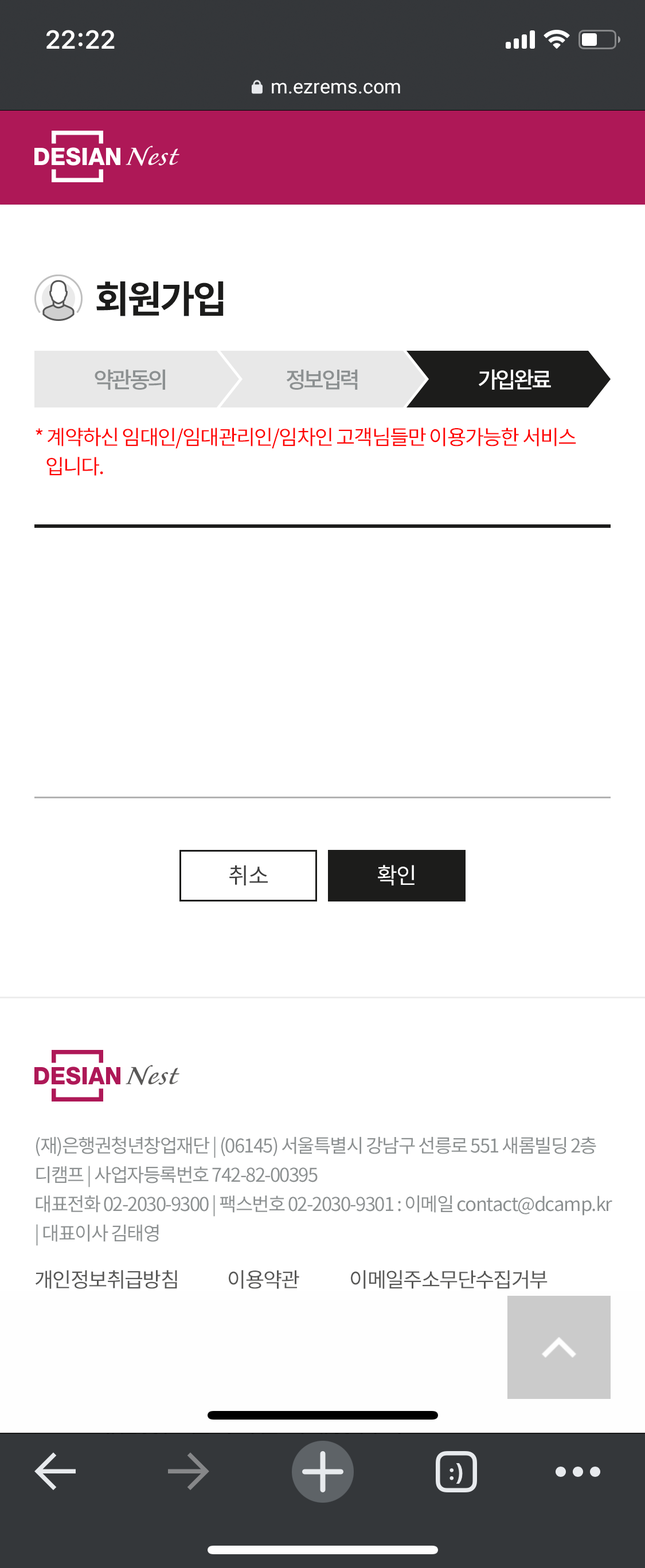
<style>
.page{position:relative;width:645px;height:1568px;background:#ffffff}
.page>*{position:absolute;margin:0}
.t1{font:19.5px "Roboto-Regular";color:#ffffff}
.t2{font:37.8px "NotoSansCJKkr-Bold";letter-spacing:-0.06em;color:#1c1c1b}
.t3{font:22.4px "NotoSansCJKkr-Medium";letter-spacing:-0.12em;color:#8c9091}
.t4{font:22.4px "NotoSansCJKkr-Medium";letter-spacing:-0.12em;color:#ffffff}
.t5{font:20.6px/29.2px "NotoSansCJKkr-Regular";letter-spacing:-0.05em;color:#fe0000}
.t6{font:22.4px "NotoSansCJKkr-Regular";letter-spacing:-0.035em;color:#3d3d3d}
.t7{font:22.4px "NotoSansCJKkr-Regular";letter-spacing:-0.035em;color:#ffffff}
.t8{font:18.9px/29.2px "NotoSansCJKkr-Regular";letter-spacing:-0.045em;color:#8c9091}
.t9{font:20.6px "NotoSansCJKkr-Regular";letter-spacing:-0.045em;color:#575756}
</style>
<div class="page">
<p class="t1" style="left:272px;top:83px;width:128px;height:11px">m.ezrems.com</p>
<p class="t2" style="left:96px;top:281px;width:128px;height:35px">회원가입</p>
<p class="t3" style="left:95px;top:369px;width:70px;height:21px">약관동의</p>
<p class="t3" style="left:287px;top:369px;width:71px;height:21px">정보입력</p>
<p class="t4" style="left:479px;top:369px;width:72px;height:21px">가입완료</p>
<p class="t5" style="left:36px;top:428px;width:540px;height:48px">* 계약하신 임대인/임대관리인/임차인 고객님들만 이용가능한 서비스 <br>   입니다.</p>
<p class="t6" style="left:229px;top:865px;width:39px;height:20px">취소</p>
<p class="t7" style="left:378px;top:865px;width:36px;height:20px">확인</p>
<p class="t8" style="left:36px;top:1136px;width:576px;height:110px">(재)은행권청년창업재단 | (06145) 서울특별시 강남구 선릉로 551 새롬빌딩 2층<br>디캠프 | 사업자등록번호 742-82-00395<br>대표전화 02-2030-9300 | 팩스번호 02-2030-9301 : 이메일 contact@dcamp.kr<br>| 대표이사 김태영</p>
<p class="t9" style="left:35px;top:1270px;width:142px;height:19px">개인정보취급방침</p>
<p class="t9" style="left:229px;top:1270px;width:70px;height:19px">이용약관</p>
<p class="t9" style="left:351px;top:1270px;width:196px;height:19px">이메일주소무단수집거부</p>
</div>
